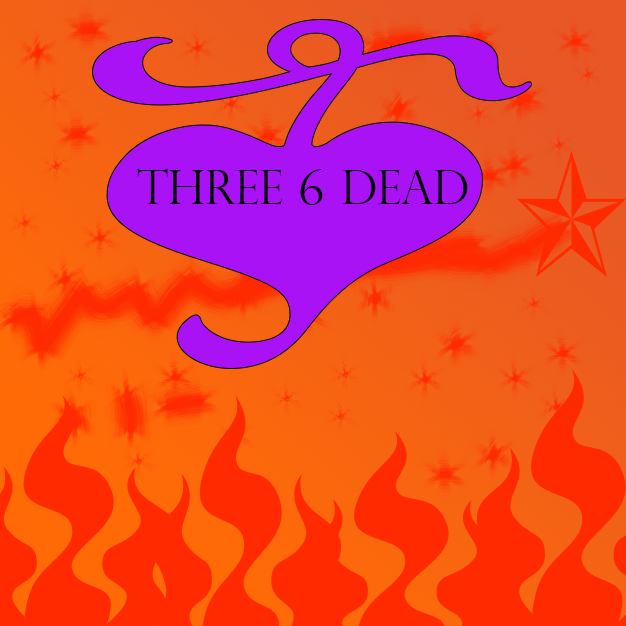
<style>
.page{position:relative;width:626px;height:626px}
.page>*{position:absolute;margin:0}
.t1{font:46.7px "PerpetuaTitlingMT-Light";color:#000000}
</style>
<div class="page">
<p class="t1" style="left:137px;top:168px;width:331px;height:37px">Three 6 Dead</p>
</div>
